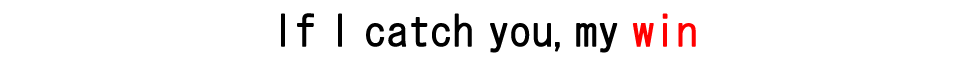
<style>
.page{position:relative;width:972px;height:69px;background:#ffffff}
.page>*{position:absolute;margin:0}
.t1{font:41.7px "HGGothicM";color:#000000;font-weight:bold}
.t2{font:41.7px "HGGothicM";color:#ff0000;font-weight:bold}
</style>
<div class="page">
<p class="t1" style="left:281px;top:13px;width:415px;height:40px;text-align:center">If I catch you,my <span class="t2">win<br></span>If I catch you, my win</p>
</div>
